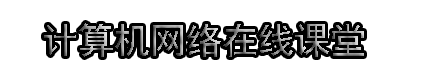
<style>
.page{position:relative;width:445px;height:80px;background:#ffffff}
.page>*{position:absolute;margin:0}
.t1{font:36px "SimHei"}
</style>
<div class="page">
<p class="t1" style="left:44px;top:23px;width:320px;height:34px">计算机网络在线课堂</p>
</div>
